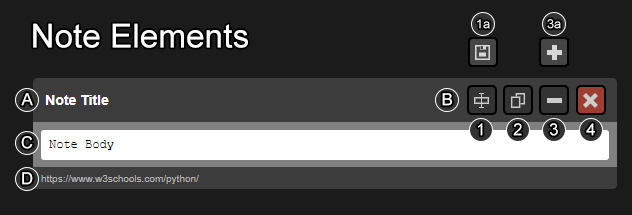
<style>
.page{position:relative;width:632px;height:215px;background:#1b1b1b}
.page>*{position:absolute;margin:0}
.t1{font:33.3px "ArialMT";color:#ffffff}
.t2{font:12.5px "ArialMT";color:#ffffff}
.t3{font:16.7px "ArialMT";color:#ffffff}
</style>
<div class="page">
<p class="t1" style="left:33px;top:23px;width:215px;height:25px">Note Elements</p>
<p class="t2" style="left:477px;top:19px;width:13px;height:10px">1a</p>
<p class="t2" style="left:547px;top:19px;width:14px;height:10px">3a</p>
<p class="t3" style="left:21px;top:93px;width:12px;height:13px">A</p>
<p class="t3" style="left:442px;top:93px;width:10px;height:13px">B</p>
<p class="t3" style="left:478px;top:123px;width:5px;height:13px">1</p>
<p class="t3" style="left:513px;top:123px;width:9px;height:13px">2</p>
<p class="t3" style="left:550px;top:123px;width:8px;height:13px">3</p>
<p class="t3" style="left:586px;top:123px;width:9px;height:13px">4</p>
<p class="t3" style="left:21px;top:136px;width:12px;height:13px">C</p>
<p class="t3" style="left:22px;top:172px;width:11px;height:13px">D</p>
</div>
